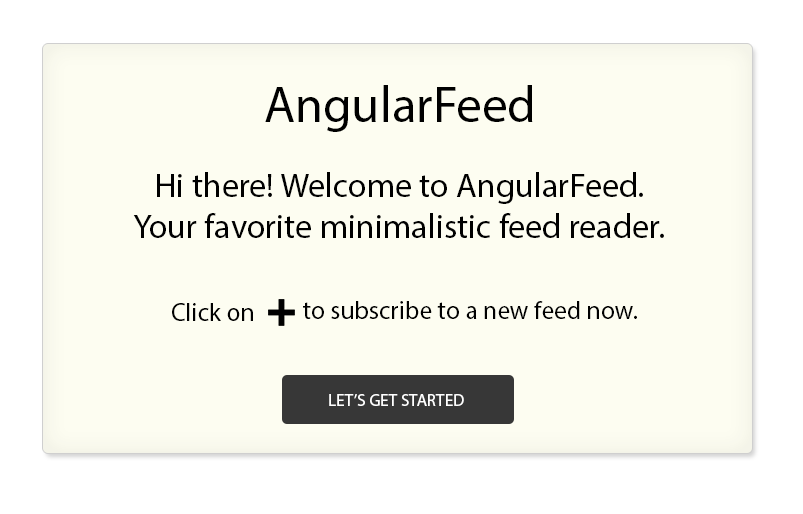
<style>
.page{position:relative;width:803px;height:514px;background:#fdfdf1}
.page>*{position:absolute;margin:0}
.t1{font:51px "MyriadPro-Regular";color:#000000}
.t2{font:34px "MyriadPro-Regular";color:#000000}
.t3{font:25.5px "MyriadPro-Regular";color:#000000}
.t4{font:17px "MyriadPro-Regular";color:#ffffff}
</style>
<div class="page">
<p class="t1" style="left:265px;top:85px;width:268px;height:47px">AngularFeed</p>
<p class="t2" style="left:133px;top:172px;width:531px;height:66px;text-align:center">Hi there! Welcome to AngularFeed.  <br>Your favorite minimalistic feed reader.</p>
<p class="t3" style="left:172px;top:303px;width:81px;height:18px">Click on</p>
<p class="t3" style="left:303px;top:301px;width:334px;height:18px">to subscribe to a new feed now.</p>
<p class="t4" style="left:329px;top:394px;width:135px;height:12px">LET’S GET STARTED</p>
</div>
